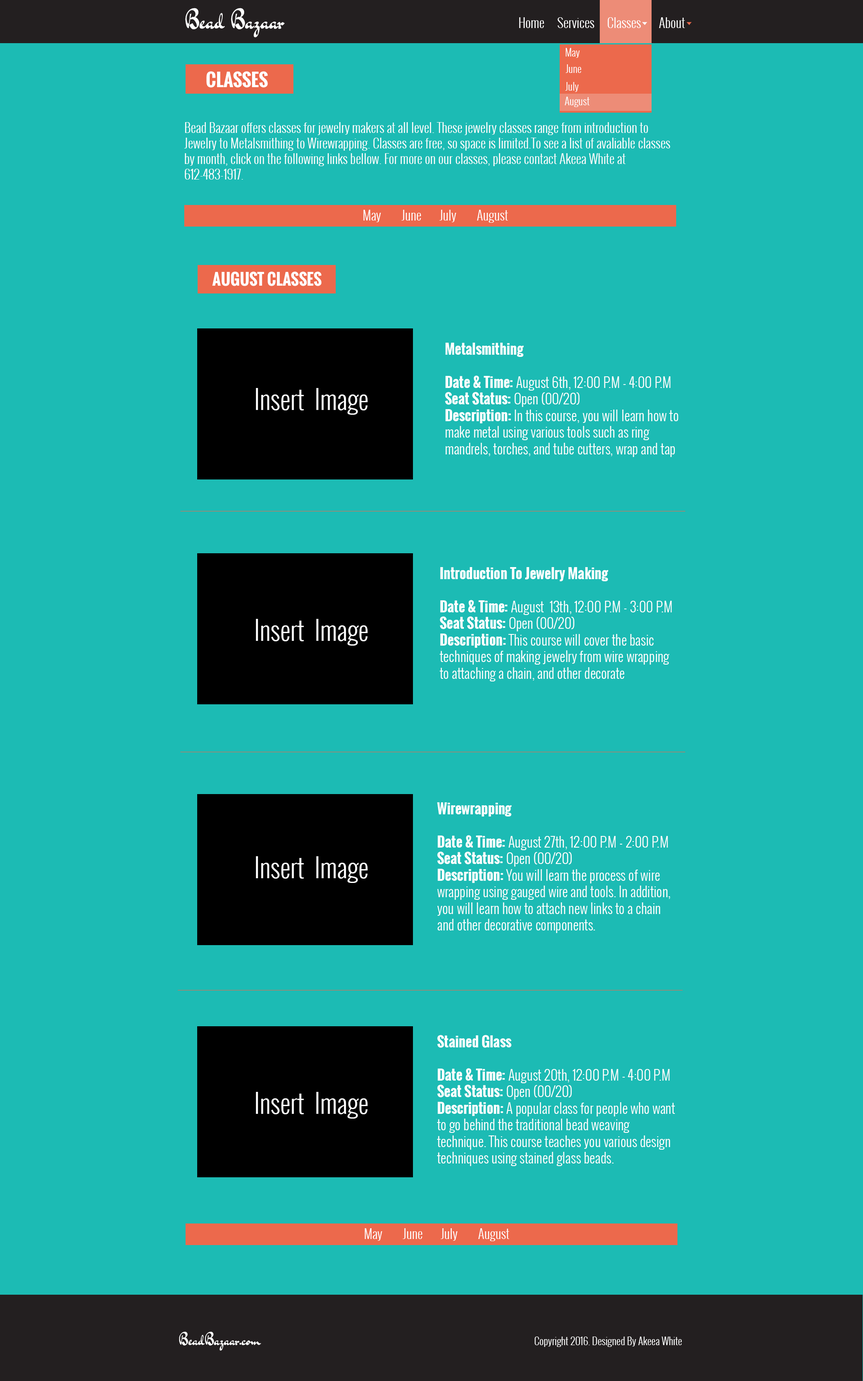
<style>
.page{position:relative;width:863px;height:1381px;background:#1cbbb4}
.page>*{position:absolute;margin:0}
.t1{font:24.2px "DrSugiyama-Regular";color:#ffffff}
.t2{font:12.9px "Oswald-Light";color:#ffffff}
.t3{font:15.5px "Oswald-Regular";color:#ffffff}
.t4{font:10.4px "Oswald-Light";color:#ffffff}
.t5{font:17.7px "Oswald-Bold";color:#ffffff}
.t6{font:15.5px "Oswald-Bold";color:#ffffff}
.t7{font:13.8px "Oswald-Light";color:#ffffff}
.t8{font:13.8px "Oswald-Bold";color:#ffffff}
.t9{font:25.9px "Oswald-Light";color:#ffffff}
.t10{font:15.5px "DrSugiyama-Regular";color:#ffffff}
</style>
<div class="page">
<p class="t1" style="left:185px;top:8px;width:100px;height:30px">Bead Bazaar</p>
<p class="t2" style="left:519px;top:17px;width:166px;height:11px"><span class="t3">  </span>Home     Services     Classes       About</p>
<p class="t4" style="left:566px;top:48px;width:14px;height:10px">May</p>
<p class="t4" style="left:566px;top:64px;width:15px;height:9px">June</p>
<p class="t5" style="left:206px;top:71px;width:62px;height:17px">CLASSES</p>
<p class="t4" style="left:565px;top:82px;width:14px;height:10px">July</p>
<p class="t4" style="left:565px;top:97px;width:25px;height:10px">August</p>
<p class="t2" style="left:184px;top:122px;width:486px;height:58px">Bead Bazaar offers classes for jewelry makers at all level. These jewelry classes range from introduction to <br>Jewelry to Metalsmithing to Wirewrapping. Classes are free, so space is limited.To see a list of avaliable classes <br>by month, click on the following links bellow. For more on our classes, please contact Akeea White at <br>612-483-1917.</p>
<p class="t2" style="left:363px;top:210px;width:145px;height:13px">May        June       July        August</p>
<p class="t6" style="left:212px;top:272px;width:110px;height:14px">AUGUST CLASSES</p>
<p class="t7" style="left:445px;top:343px;width:234px;height:114px"><span class="t8">Metalsmithing<br><br>Date &amp; Time: </span>August 6th, 12:00 P.M - 4:00 P.M<br><span class="t8">Seat Status: </span>Open (00/20)<br><span class="t8">Description: </span>In this course, you will learn how to <br>make metal using various tools such as ring <br>mandrels, torches, and tube cutters, wrap and tap <br>pliers. <br>Tools will be provided to the class.</p>
<p class="t9" style="left:256px;top:388px;width:112px;height:27px">Insert  Image</p>
<p class="t7" style="left:440px;top:567px;width:232px;height:115px"><span class="t8">Introduction To Jewelry Making<br><br>Date &amp; Time: </span>August  13th, 12:00 P.M - 3:00 P.M<br><span class="t8">Seat Status: </span>Open (00/20)<br><span class="t8">Description: </span>This course will cover the basic techniques of making jewelry from wire wrapping to attaching a chain, and other decorate components.</p>
<p class="t9" style="left:256px;top:619px;width:112px;height:27px">Insert  Image</p>
<p class="t7" style="left:437px;top:802px;width:233px;height:131px"><span class="t8">Wirewrapping<br><br>Date &amp; Time: </span>August 27th, 12:00 P.M - 2:00 P.M<br><span class="t8">Seat Status: </span>Open (00/20)<br><span class="t8">Description: </span>You will learn the process of wire wrapping using gauged wire and tools. In addition, you will learn how to attach new links to a chain and other decorative components.</p>
<p class="t9" style="left:256px;top:856px;width:112px;height:27px">Insert  Image</p>
<p class="t7" style="left:437px;top:1035px;width:238px;height:131px"><span class="t8">Stained Glass<br><br>Date &amp; Time: </span>August 20th, 12:00 P.M - 4:00 P.M<br><span class="t8">Seat Status: </span>Open (00/20)<br><span class="t8">Description: </span>A popular class for people who want <br>to go behind the traditional bead weaving <br>technique. This course teaches you various design techniques using stained glass beads.</p>
<p class="t9" style="left:256px;top:1092px;width:112px;height:27px">Insert  Image</p>
<p class="t2" style="left:365px;top:1228px;width:145px;height:13px">May        June       July        August</p>
<p class="t10" style="left:179px;top:1332px;width:82px;height:19px">BeadBazaar.com</p>
<p class="t4" style="left:535px;top:1337px;width:147px;height:10px">Copyright 2016. Designed By Akeea White</p>
</div>
